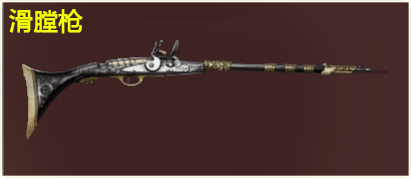
<style>
.page{position:relative;width:411px;height:178px}
.page>*{position:absolute;margin:0}
.t1{font:24px "MicrosoftYaHeiUI";color:#f4ff00;font-weight:bold}
</style>
<div class="page">
<p class="t1" style="left:9px;top:9px;width:74px;height:25px">滑膛枪</p>
</div>
